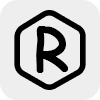
<style>
.page{position:relative;width:100px;height:100px;background:#eeeeee}
.page>*{position:absolute;margin:0}
.t1{font:59.2px "ComicSansMS";color:#000000;font-weight:bold;scale:0.95 1}
</style>
<div class="page">
<p class="t1" style="left:36px;top:26px;width:32px;height:47px">R</p>
</div>
